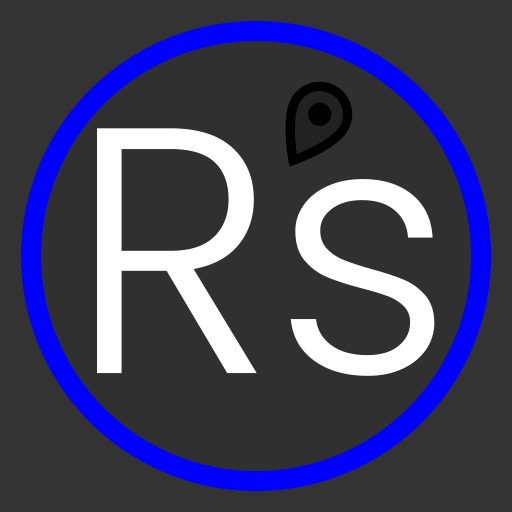
<style>
.page{position:relative;width:512px;height:512px;background:#303030}
.page>*{position:absolute;margin:0}
.t1{font:350px "Poppins-Light";color:#ffffff}
</style>
<div class="page">
<p class="t1" style="left:97px;top:128px;width:338px;height:248px">Rs</p>
</div>
